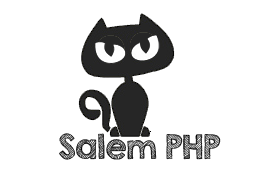
<style>
.page{position:relative;width:274px;height:180px;background:#ffffff}
.page>*{position:absolute;margin:0}
.t1{font:30px "KGSecondChancesSketch";color:#020202}
</style>
<div class="page">
<p class="t1" style="left:59px;top:133px;width:162px;height:27px">Salem PHP</p>
</div>
